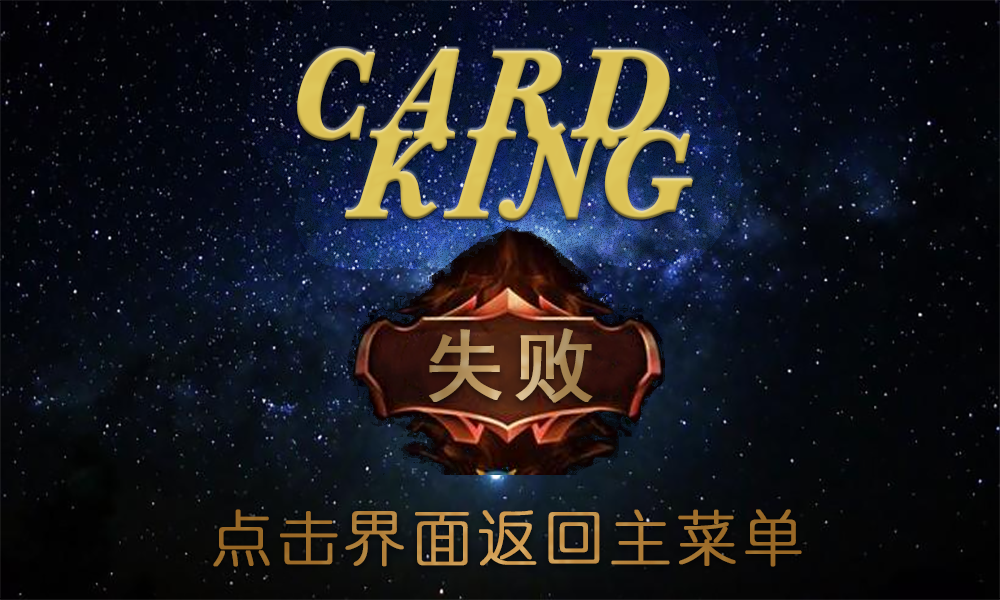
<style>
.page{position:relative;width:1000px;height:600px}
.page>*{position:absolute;margin:0}
.t1{font:120px/80px "HGH2X_CNKI";letter-spacing:0.08em;color:#dec75b;font-weight:bold}
.t2{font:80px "SimHei";letter-spacing:0.08em;font-weight:bold}
.t3{font:60px "YouYuan";letter-spacing:0.08em;font-weight:bold}
</style>
<div class="page">
<p class="t1" style="left:297px;top:48px;width:396px;height:173px">CARD<br> KING</p>
<p class="t2" style="left:429px;top:328px;width:164px;height:75px">失败</p>
<p class="t3" style="left:213px;top:509px;width:589px;height:58px">点击界面返回主菜单</p>
</div>
